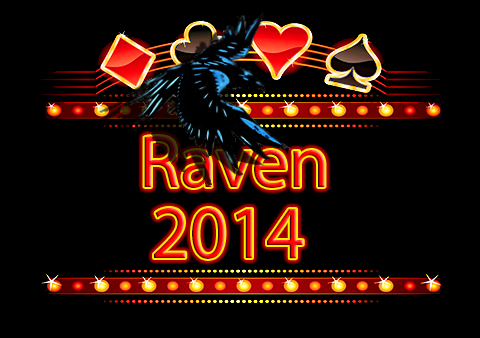
<style>
.page{position:relative;width:480px;height:338px;background:#000000}
.page>*{position:absolute;margin:0}
.t1{font:75px "MyriadHebrew-Regular"}
.t2{font:100px "MyriadHebrew-Regular"}
</style>
<div class="page">
<p class="t1" style="left:144px;top:136px;width:181px;height:52px">Raven<span class="t2">  Soft</span></p>
<p class="t1" style="left:154px;top:208px;width:149px;height:51px"><span class="t2"> </span>2014</p>
</div>
